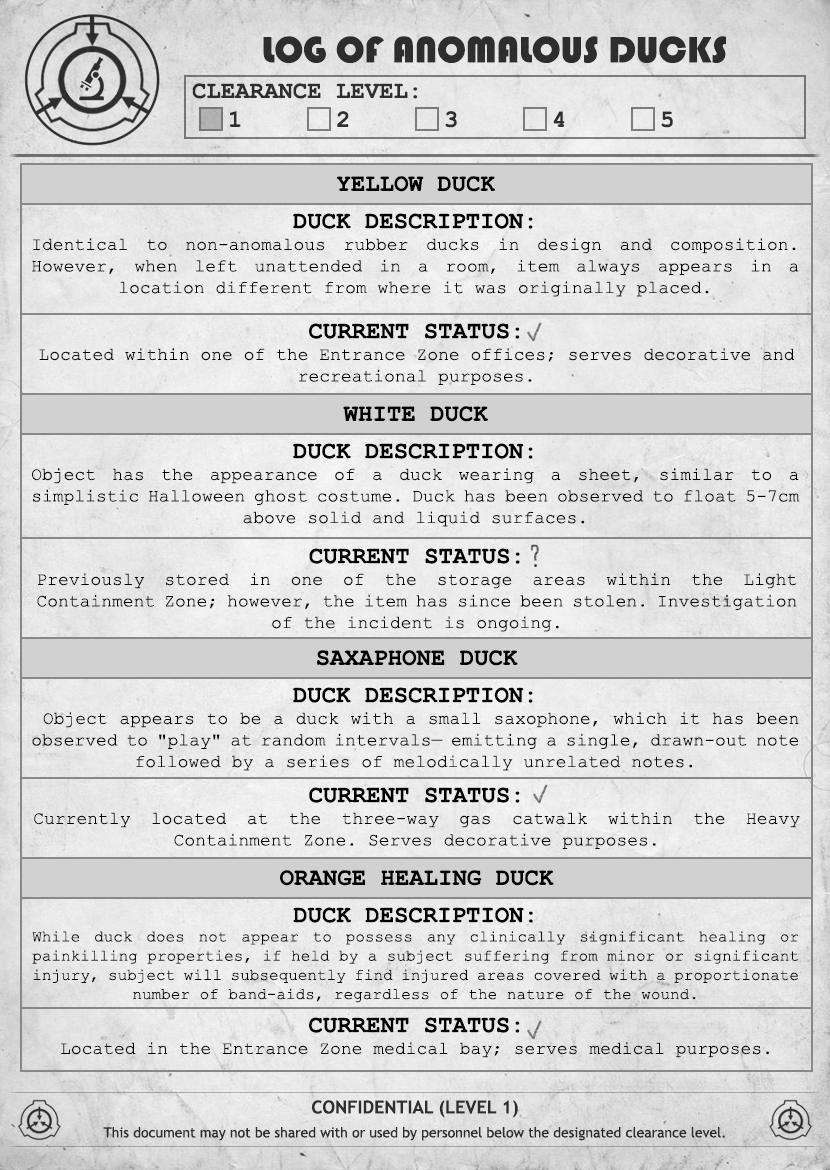
<style>
.page{position:relative;width:830px;height:1170px}
.page>*{position:absolute;margin:0}
.t1{font:38px "Bauhaus93";color:#333333}
.t2{font:24px "CourierNewPS-BoldMT";color:#333333}
.t3{font:24px "CourierNewPS-BoldMT";color:#333333;text-transform:uppercase}
.t4{font:24px "CourierNewPS-BoldMT";color:#000000;text-transform:uppercase}
.t5{font:18px "CourierNewPSMT";color:#000000}
.t6{font:16px "CourierNewPSMT";color:#000000}
.t7{font:14px/24px "TrebuchetMS";color:#333333}
.t8{font:18px/24px "TrebuchetMS-Bold";color:#333333}
</style>
<div class="page">
<p class="t1" style="left:263px;top:36px;width:463px;height:27px">LOG OF ANOMALOUS DUCKS</p>
<p class="t2" style="left:192px;top:83px;width:481px;height:45px"><span class="t3">CLEARANCE LEVEL:</span> <br> 1   2   3   4   5</p>
<p class="t4" style="left:336px;top:176px;width:160px;height:16px">Yellow Duck</p>
<p class="t5" style="left:32px;top:213px;width:767px;height:84px;text-align:justify"><span class="t4">DUCK Description: <br></span>Identical to non-anomalous rubber ducks in design and composition. However, when left unattended in a room, item always appears in a location different from where it was originally placed.</p>
<p class="t5" style="left:39px;top:323px;width:756px;height:62px;text-align:justify"><span class="t4">Current Status: <br></span>Located within one of the Entrance Zone offices; serves decorative and recreational purposes.</p>
<p class="t4" style="left:343px;top:406px;width:145px;height:16px">White Duck</p>
<p class="t5" style="left:32px;top:443px;width:768px;height:84px;text-align:justify"><span class="t4">DUCK Description: <br></span>Object has the appearance of a duck wearing a sheet, similar to a simplistic Halloween ghost costume. Duck has been observed to float 5-7cm above solid and liquid surfaces.</p>
<p class="t5" style="left:37px;top:548px;width:760px;height:84px;text-align:justify"><span class="t4">Current Status: <br></span>Previously stored in one of the storage areas within the Light Containment Zone; however, the item has since been stolen. Investigation of the incident is ongoing.</p>
<p class="t4" style="left:317px;top:650px;width:201px;height:16px">Saxaphone Duck</p>
<p class="t5" style="left:32px;top:687px;width:767px;height:84px;text-align:justify"><span class="t4">DUCK Description:<br></span> Object appears to be a duck with a small saxophone, which it has been observed to "play" at random intervals— emitting a single, drawn-out note followed by a series of melodically unrelated notes.</p>
<p class="t5" style="left:34px;top:787px;width:766px;height:62px;text-align:justify"><span class="t4">Current Status: <br></span>Currently located at the three-way gas catwalk within the Heavy Containment Zone. Serves decorative purposes.</p>
<p class="t4" style="left:280px;top:870px;width:274px;height:16px">Orange healing Duck</p>
<p class="t6" style="left:32px;top:907px;width:767px;height:96px;text-align:justify"><span class="t4">DUCK Description: <br></span>While duck does not appear to possess any clinically significant healing or painkilling properties, if held by a subject suffering from minor or significant injury, subject will subsequently find injured areas covered with a proportionate number of band-aids, regardless of the nature of the wound.</p>
<p class="t5" style="left:61px;top:1017px;width:708px;height:41px;text-align:justify"><span class="t4">Current Status: <br></span>Located in the Entrance Zone medical bay; serves medical purposes.</p>
<p class="t7" style="left:103px;top:1100px;width:622px;height:41px;text-align:center"><span class="t8">CONFIDENTIAL (LEVEL 1)<br></span>This document may not be shared with or used by personnel below the designated clearance level.</p>
</div>
